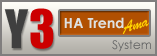
<style>
.page{position:relative;width:157px;height:56px}
.page>*{position:absolute;margin:0}
.t1{font:49px "Impact";color:#3f3f3f}
.t2{font:49px "Impact";color:#cc0000}
.t3{font:14px "CenturyGothic-Bold";color:#dee1e2}
.t4{font:16px "BrushScriptStd";letter-spacing:-0.06em;color:#ffd200;scale:0.9 1}
.t5{font:12px "CenturyGothic";color:#5c5d5e}
</style>
<div class="page">
<p class="t1" style="left:4px;top:8px;width:50px;height:41px">Y<span class="t2">3</span></p>
<p class="t3" style="left:64px;top:17px;width:60px;height:12px">HA Trend</p>
<p class="t4" style="left:122px;top:19px;width:27px;height:15px;rotate:-16deg">Ama</p>
<p class="t5" style="left:112px;top:40px;width:39px;height:12px">System</p>
</div>
